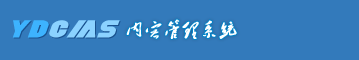
<style>
.page{position:relative;width:359px;height:60px;background:#337abb}
.page>*{position:absolute;margin:0}
.t1{font:22.1px "SFFortuneWheelExtendedItalic";letter-spacing:0.1em;color:#8bd2ff;font-style:italic}
.t2{font:22.1px "SFFortuneWheelExtendedItalic";letter-spacing:0.1em;color:#3db3fe;text-transform:uppercase;font-style:italic}
.t3{font:18px "²ÝÌ´Õ«Ã«Ôó¶«×ÖÌå";color:#ffffff;font-weight:bold}
</style>
<div class="page">
<p class="t1" style="left:12px;top:20px;width:108px;height:18px"><span class="t2">YD</span>CMS</p>
<p class="t3" style="left:126px;top:19px;width:111px;height:20px">内容管理系统</p>
</div>
